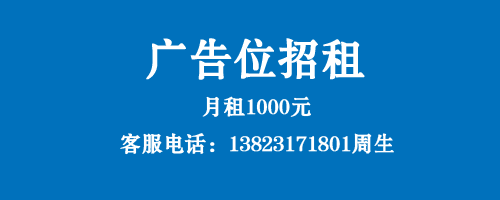
<style>
.page{position:relative;width:500px;height:200px;background:#0071bc}
.page>*{position:absolute;margin:0}
.t1{font:42.9px "FZSHJW--GB1-0";color:#ffffff;font-weight:bold}
.t2{font:21.3px "FZSHJW--GB1-0";color:#ffffff;font-weight:bold}
</style>
<div class="page">
<p class="t1" style="left:146px;top:38px;width:219px;height:42px">广告位招租</p>
<p class="t2" style="left:202px;top:96px;width:109px;height:21px">月租1000元</p>
<p class="t2" style="left:120px;top:133px;width:274px;height:22px">客服电话：13823171801周生</p>
</div>
